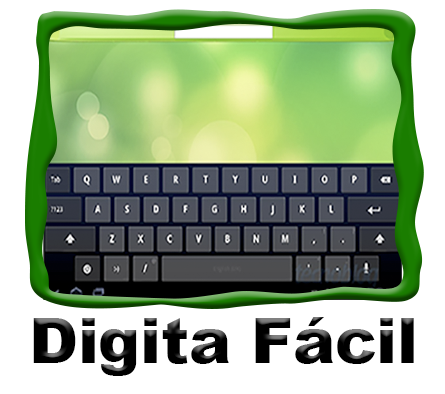
<style>
.page{position:relative;width:445px;height:394px;background:#ffffff}
.page>*{position:absolute;margin:0}
.t1{font:62.5px "Arial-Black";color:#000000}
</style>
<div class="page">
<p class="t1" style="left:33px;top:317px;width:381px;height:59px">Digita Fácil</p>
</div>
